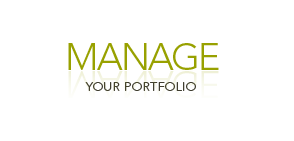
<style>
.page{position:relative;width:294px;height:141px;background:#ffffff}
.page>*{position:absolute;margin:0}
.t1{font:37.8px "Avenir-Light";letter-spacing:-0.06em;color:#98a100}
.t2{font:12.5px "Avenir-Light";letter-spacing:0.02em;color:#403e30}
</style>
<div class="page">
<p class="t1" style="left:68px;top:43px;width:151px;height:27px">MANAGE</p>
<p class="t2" style="left:85px;top:82px;width:111px;height:9px">YOUR PORTFOLIO</p>
</div>
